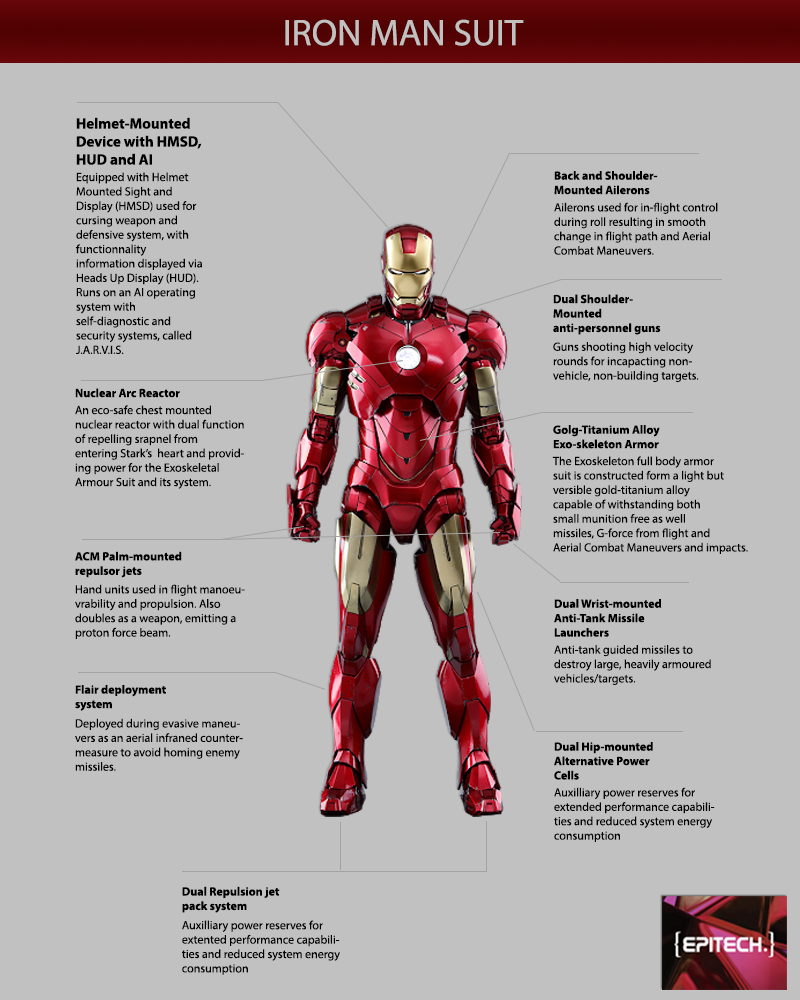
<style>
.page{position:relative;width:800px;height:1000px;background:#c1c1c1}
.page>*{position:absolute;margin:0}
.t1{font:37px "MyriadPro-Regular";color:#c1c1c1}
.t2{font:15px "MyriadPro-Bold";color:#000000}
.t3{font:12px "MyriadPro-Regular";color:#000000}
.t4{font:12px "MyriadPro-Bold";color:#000000}
</style>
<div class="page">
<p class="t1" style="left:285px;top:19px;width:239px;height:27px">IRON MAN SUIT</p>
<p class="t2" style="left:76px;top:117px;width:126px;height:48px">Helmet-Mounted<br>Device with HMSD,<br>HUD and AI</p>
<p class="t3" style="left:76px;top:172px;width:126px;height:182px">Equipped with Helmet Mounted Sight and Display (HMSD) used for cursing weapon and defensive system, with functionnality information displayed via Heads Up Display (HUD). Runs on an AI operating system with self-diagnostic and security systems, called J.A.R.V.I.S.</p>
<p class="t4" style="left:554px;top:171px;width:104px;height:24px">Back and Shoulder-<br>Mounted Ailerons</p>
<p class="t3" style="left:554px;top:202px;width:164px;height:53px">Ailerons used for in-flight control<br>during roll resulting in smooth<br>change in flight path and Aerial<br>Combat Maneuvers.</p>
<p class="t4" style="left:553px;top:294px;width:108px;height:41px">Dual Shoulder-<br>Mounted<br>anti-personnel guns</p>
<p class="t3" style="left:553px;top:342px;width:146px;height:41px">Guns shooting high velocity<br>rounds for incapacting non-<br>vehicle, non-building targets.</p>
<p class="t4" style="left:75px;top:388px;width:105px;height:10px">Nuclear Arc Reactor</p>
<p class="t3" style="left:75px;top:405px;width:169px;height:84px">An eco-safe chest mounted<br>nuclear reactor with dual function<br>of repelling srapnel from<br>entering Stark’s  heart and provid-<br>ing power for the Exoskeletal<br>Armour Suit and its system.</p>
<p class="t4" style="left:553px;top:425px;width:107px;height:24px">Golg-Titanium Alloy<br>Exo-skeleton Armor</p>
<p class="t3" style="left:552px;top:456px;width:196px;height:98px">The Exoskeleton full body armor<br>suit is constructed form a light but<br>versible gold-titanium alloy<br>capable of withstanding both<br>small munition free as well<br>missiles, G-force from flight and<br>Aerial Combat Maneuvers and impacts.</p>
<p class="t4" style="left:75px;top:551px;width:107px;height:27px">ACM Palm-mounted<br>repulsor jets</p>
<p class="t3" style="left:75px;top:584px;width:170px;height:55px">Hand units used in flight manoeu-<br>vrability and propulsion. Also<br>doubles as a weapon, emitting a<br>proton force beam.</p>
<p class="t4" style="left:554px;top:599px;width:108px;height:38px">Dual Wrist-mounted<br>Anti-Tank Missile<br>Launchers</p>
<p class="t3" style="left:554px;top:645px;width:157px;height:40px">Anti-tank guided missiles to<br>destroy large, heavily armoured<br>vehicles/targets.</p>
<p class="t4" style="left:75px;top:685px;width:91px;height:26px">Flair deployment<br>system</p>
<p class="t3" style="left:75px;top:718px;width:168px;height:53px">Deployed during evasive maneu-<br>vers as an aerial infraned counter-<br>measure to avoid homing enemy<br>missiles.</p>
<p class="t4" style="left:554px;top:742px;width:99px;height:38px">Dual Hip-mounted<br>Alternative Power<br>Cells</p>
<p class="t3" style="left:554px;top:787px;width:161px;height:55px">Auxilliary power reserves for<br>extended performance capabili-<br>ties and reduced system energy<br>consumption</p>
<p class="t4" style="left:182px;top:886px;width:98px;height:27px">Dual Repulsion jet<br>pack system</p>
<p class="t3" style="left:182px;top:920px;width:158px;height:55px">Auxilliary power reserves for<br>extented performance capabili-<br>ties and reduced system energy<br>consumption</p>
</div>
